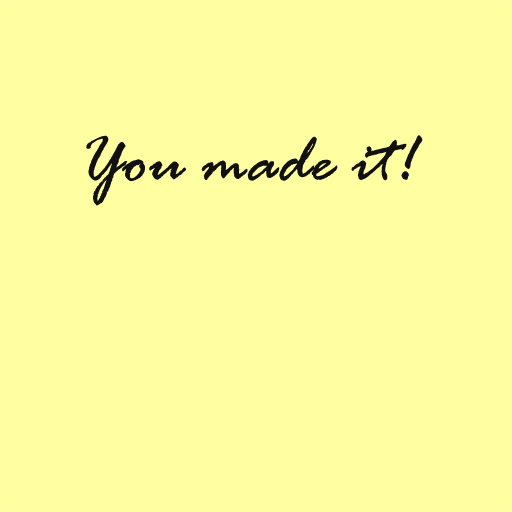
<style>
.page{position:relative;width:512px;height:512px;background:#fffea0}
.page>*{position:absolute;margin:0}
.t1{font:72px "RageItalic";color:#111111}
</style>
<div class="page">
<p class="t1" style="left:86px;top:135px;width:337px;height:71px">You made it!</p>
</div>
